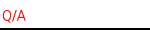
<style>
.page{position:relative;width:150px;height:30px;background:#ffffff}
.page>*{position:absolute;margin:0}
.t1{font:14px "NanumGothic";color:#dc241f;scale:0.9 1}
</style>
<div class="page">
<p class="t1" style="left:2px;top:9px;width:24px;height:14px">Q/A</p>
</div>
